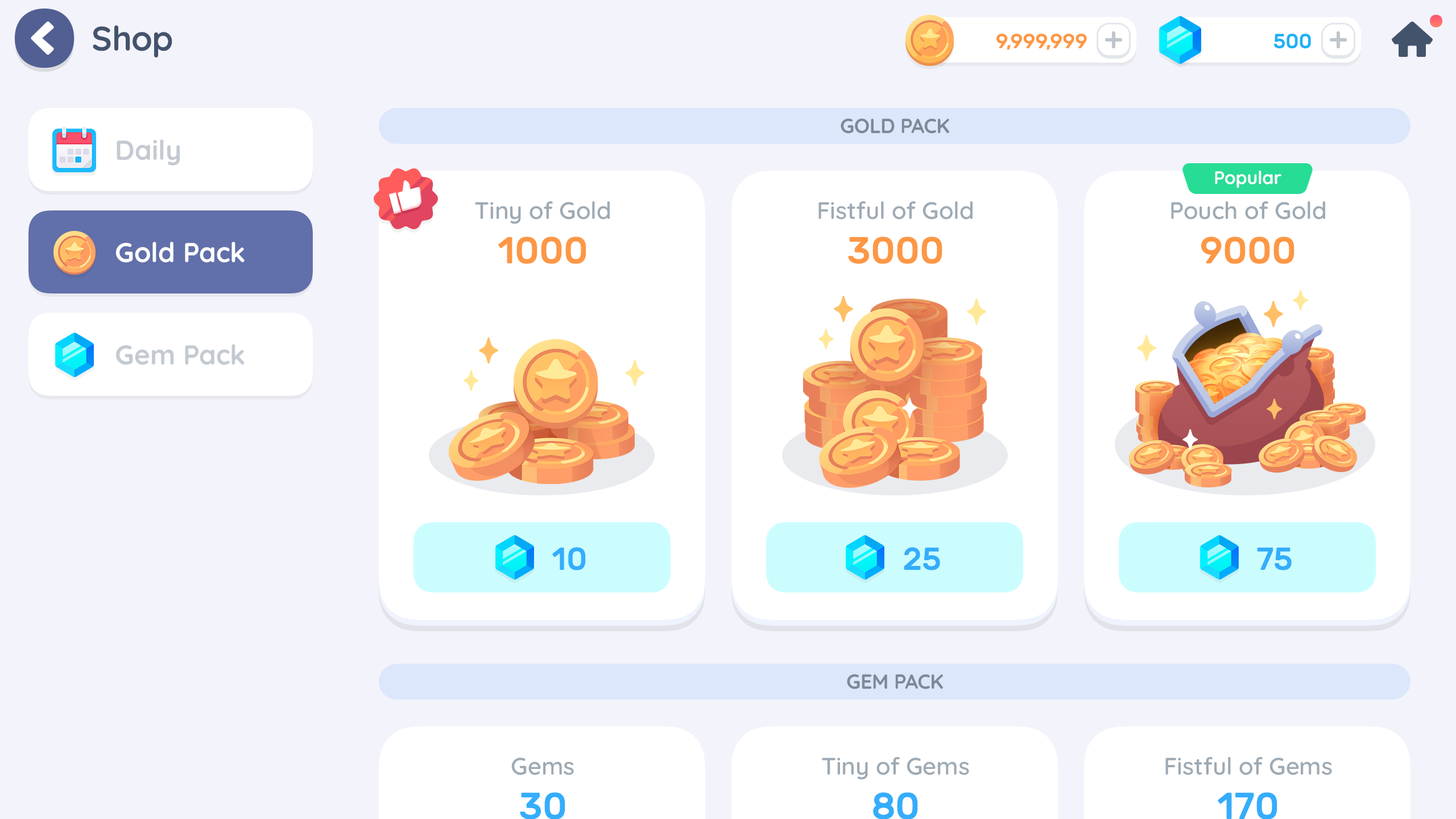
<style>
.page{position:relative;width:1456px;height:819px;background:#f3f3fb}
.page>*{position:absolute;margin:0}
.t1{font:34.1px "Quicksand-Bold";letter-spacing:-0.01em;color:#43536c}
.t2{font:20.5px "Rubik-Medium";letter-spacing:-0.01em;color:#fd9744;text-transform:uppercase}
.t3{font:20.5px "Rubik-Medium";letter-spacing:-0.01em;color:#1cb0f6;text-transform:uppercase}
.t4{font:20.5px "Quicksand-Bold";letter-spacing:-0.01em;color:#7c8a97;text-transform:uppercase}
.t5{font:27.3px "Quicksand-Bold";color:#c4cad1}
.t6{font:18.2px "Quicksand-Bold";letter-spacing:-0.01em;color:#ffffff}
.t7{font:23.9px "Quicksand-SemiBold";color:#9eaab4}
.t8{font:27.3px "Quicksand-Bold";color:#ffffff}
.t9{font:37.5px "Rubik-Medium";color:#fd9744}
.t10{font:31.8px "Rubik-Medium";color:#34adfc}
</style>
<div class="page">
<p class="t1" style="left:93px;top:25px;width:79px;height:32px">Shop</p>
<p class="t2" style="left:996px;top:34px;width:91px;height:16px">9,999,999</p>
<p class="t3" style="left:1274px;top:34px;width:37px;height:14px">500</p>
<p class="t4" style="left:841px;top:118px;width:108px;height:16px">Gold Pack</p>
<p class="t5" style="left:117px;top:139px;width:63px;height:27px">Daily</p>
<p class="t6" style="left:1215px;top:171px;width:66px;height:17px">Popular</p>
<p class="t7" style="left:475px;top:201px;width:135px;height:23px">Tiny of Gold</p>
<p class="t7" style="left:818px;top:201px;width:155px;height:19px">Fistful of Gold</p>
<p class="t7" style="left:1171px;top:201px;width:154px;height:19px">Pouch of Gold</p>
<p class="t8" style="left:116px;top:242px;width:129px;height:21px">Gold Pack</p>
<p class="t9" style="left:498px;top:237px;width:88px;height:27px">1000</p>
<p class="t9" style="left:848px;top:237px;width:94px;height:27px">3000</p>
<p class="t9" style="left:1201px;top:237px;width:93px;height:27px">9000</p>
<p class="t5" style="left:116px;top:344px;width:129px;height:21px">Gem Pack</p>
<p class="t10" style="left:552px;top:547px;width:34px;height:23px">10</p>
<p class="t10" style="left:904px;top:547px;width:36px;height:23px">25</p>
<p class="t10" style="left:1257px;top:547px;width:35px;height:23px">75</p>
</div>
